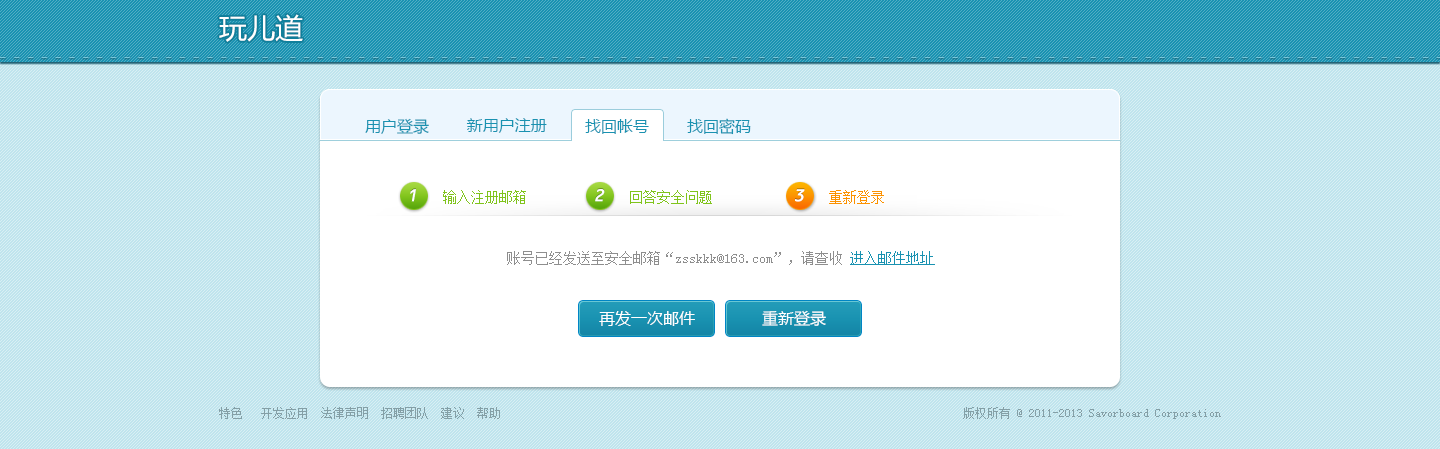
<style>
.page{position:relative;width:1440px;height:449px;background:#bfe4ed}
.page>*{position:absolute;margin:0}
.t1{font:28px "MicrosoftYaHei";color:#ffffff}
.t2{font:16px "MicrosoftYaHei";color:#1992b1}
.t3{font:19px "OCRB10PitchBT-Regular";color:#ffffff;font-style:italic}
.t4{font:14px "SimSun";color:#80c41c}
.t5{font:14px "SimSun";color:#fc9200}
.t6{font:14px "SimSun";color:#8e8e8e}
.t7{font:14px "SimSun";color:#1992b1;text-decoration:underline}
.t8{font:16px "MicrosoftYaHei";color:#ffffff}
.t9{font:12px "SimSun";color:#849fa6}
</style>
<div class="page">
<p class="t1" style="left:219px;top:14px;width:84px;height:28px">玩儿道</p>
<p class="t2" style="left:365px;top:118px;width:64px;height:16px">用户登录</p>
<p class="t2" style="left:466px;top:118px;width:81px;height:15px">新用户注册</p>
<p class="t2" style="left:585px;top:119px;width:64px;height:15px">找回帐号</p>
<p class="t2" style="left:687px;top:118px;width:64px;height:17px">找回密码</p>
<p class="t3" style="left:410px;top:189px;width:6px;height:13px">1</p>
<p class="t4" style="left:443px;top:190px;width:83px;height:14px">输入注册邮箱</p>
<p class="t3" style="left:595px;top:189px;width:10px;height:13px">2</p>
<p class="t4" style="left:630px;top:190px;width:82px;height:14px">回答安全问题</p>
<p class="t3" style="left:795px;top:189px;width:10px;height:13px">3</p>
<p class="t5" style="left:829px;top:190px;width:55px;height:14px">重新登录</p>
<p class="t6" style="left:507px;top:251px;width:428px;height:14px">账号已经发送至安全邮箱“zsskkk@163.com”，请查收 <span class="t7">进入邮件地址</span></p>
<p class="t8" style="left:599px;top:311px;width:96px;height:15px">再发一次邮件</p>
<p class="t8" style="left:762px;top:310px;width:64px;height:16px">重新登录</p>
<p class="t9" style="left:219px;top:407px;width:281px;height:12px">特色   开发应用  法律声明  招聘团队  建议  帮助</p>
<p class="t9" style="left:963px;top:407px;width:258px;height:12px">版权所有 @ 2011-2013 Savorboard Corporation</p>
</div>
